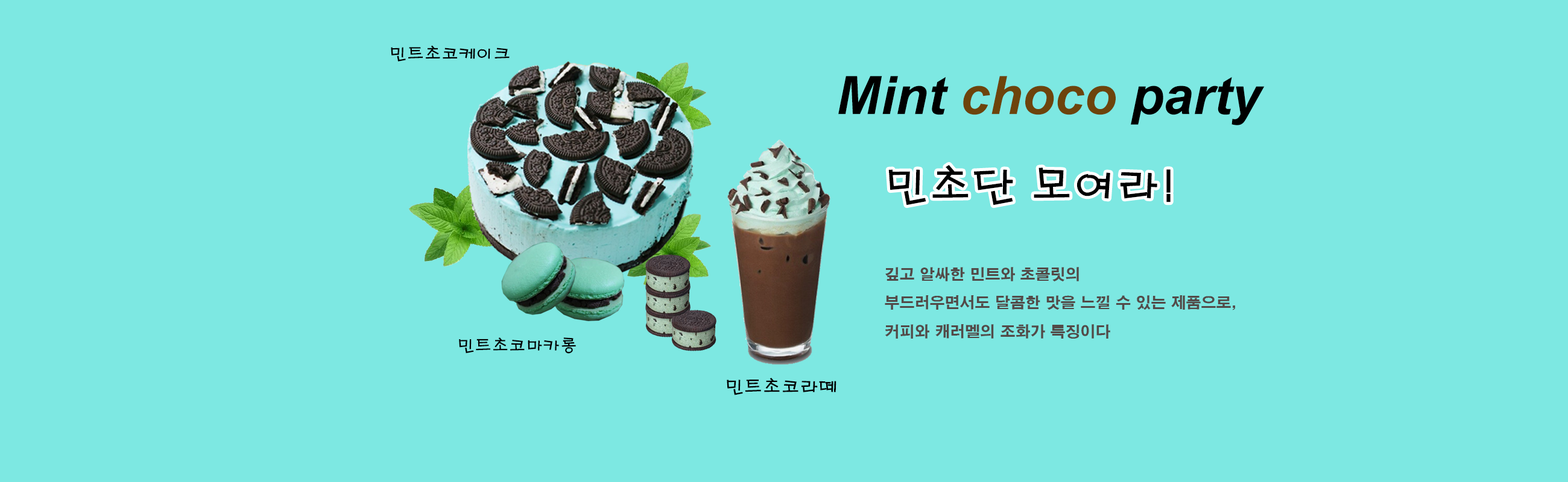
<style>
.page{position:relative;width:1568px;height:482px;background:#7de8e2}
.page>*{position:absolute;margin:0}
.t1{font:17.3px "H2porM";color:#000000}
.t2{font:53.1px "Arial-BoldItalicMT";color:#6d440c}
.t3{font:53.1px "Arial-BoldItalicMT";color:#000000}
.t4{font:43.4px "H2porM";color:#000000}
.t5{font:15.1px/28.6px "H2gtrE";color:#534a48}
.t6{font:17.1px "H2porM";color:#000000}
.t7{font:18.7px "H2porM";color:#000000}
</style>
<div class="page">
<p class="t1" style="left:391px;top:45px;width:119px;height:17px">민트초코케이크</p>
<p class="t2" style="left:838px;top:76px;width:427px;height:49px"><span class="t3">Mint </span>choco<span class="t3"> party</span></p>
<p class="t4" style="left:888px;top:165px;width:283px;height:41px">민초단 모여라!</p>
<p class="t5" style="left:885px;top:267px;width:350px;height:72px">깊고 알싸한 민트와 초콜릿의 <br>부드러우면서도 달콤한 맛을 느낄 수 있는 제품으로, <br>커피와 캐러멜의 조화가 특징이다</p>
<p class="t6" style="left:459px;top:338px;width:117px;height:16px">민트초코마카롱</p>
<p class="t7" style="left:727px;top:378px;width:109px;height:18px">민트초코라떼</p>
</div>
